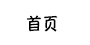
<style>
.page{position:relative;width:90px;height:45px;background:#ffffff}
.page>*{position:absolute;margin:0}
.t1{font:16.7px "HannotateSC-W7";color:#000000}
</style>
<div class="page">
<p class="t1" style="left:26px;top:15px;width:32px;height:17px">首页</p>
</div>
